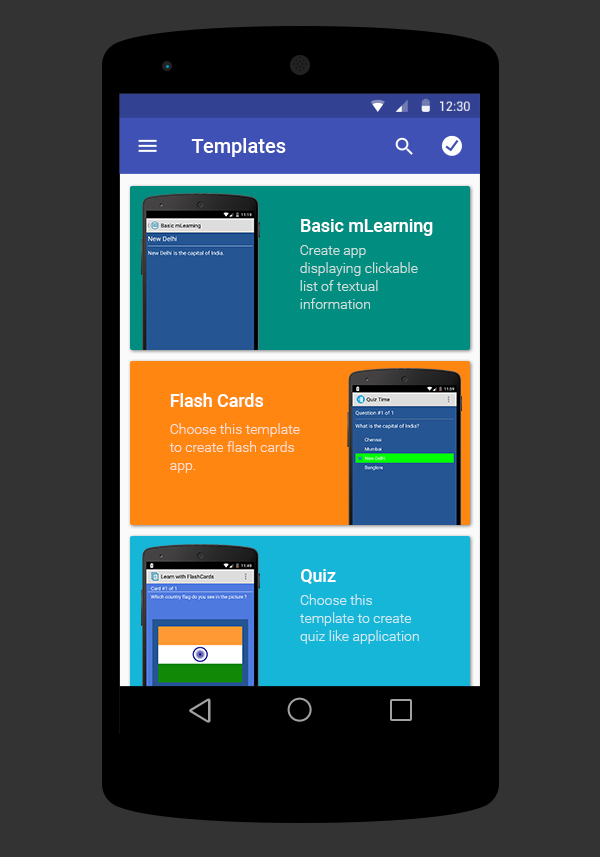
<style>
.page{position:relative;width:600px;height:857px;background:#333333}
.page>*{position:absolute;margin:0}
.t1{font:12.7px "Roboto-Regular";color:#ffffff}
.t2{font:20px "Roboto-Medium";color:#ffffff}
.t3{font:18px "Roboto-Medium";color:#ffffff}
.t4{font:14px/18px "Roboto-Light";color:#cbe1de}
.t5{font:14px/18px "Roboto-Light";color:#ffdfcd}
.t6{font:14px/18px "Roboto-Light";color:#cdebf4}
</style>
<div class="page">
<p class="t1" style="left:440px;top:101px;width:30px;height:10px">12:30</p>
<p class="t2" style="left:191px;top:138px;width:95px;height:19px">Templates</p>
<p class="t3" style="left:301px;top:219px;width:132px;height:17px">Basic mLearning</p>
<p class="t4" style="left:300px;top:245px;width:118px;height:64px">Create app displaying clickable list of textual information</p>
<p class="t3" style="left:170px;top:393px;width:94px;height:14px">Flash Cards</p>
<p class="t5" style="left:169px;top:423px;width:131px;height:50px">Choose this template to create flash cards app.</p>
<p class="t3" style="left:301px;top:569px;width:35px;height:15px">Quiz</p>
<p class="t6" style="left:300px;top:594px;width:119px;height:50px">Choose this template to create quiz like application</p>
</div>
